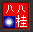
<style>
.page{position:relative;width:33px;height:32px;background:#f20000}
.page>*{position:absolute;margin:0}
.t1{font:10.4px "SimSun";color:#ffffff}
.t2{font:11.7px "SimSun";color:#ffffff}
</style>
<div class="page">
<p class="t1" style="left:6px;top:5px;width:19px;height:8px">八八</p>
<p class="t2" style="left:16px;top:15px;width:11px;height:12px">桂</p>
</div>
